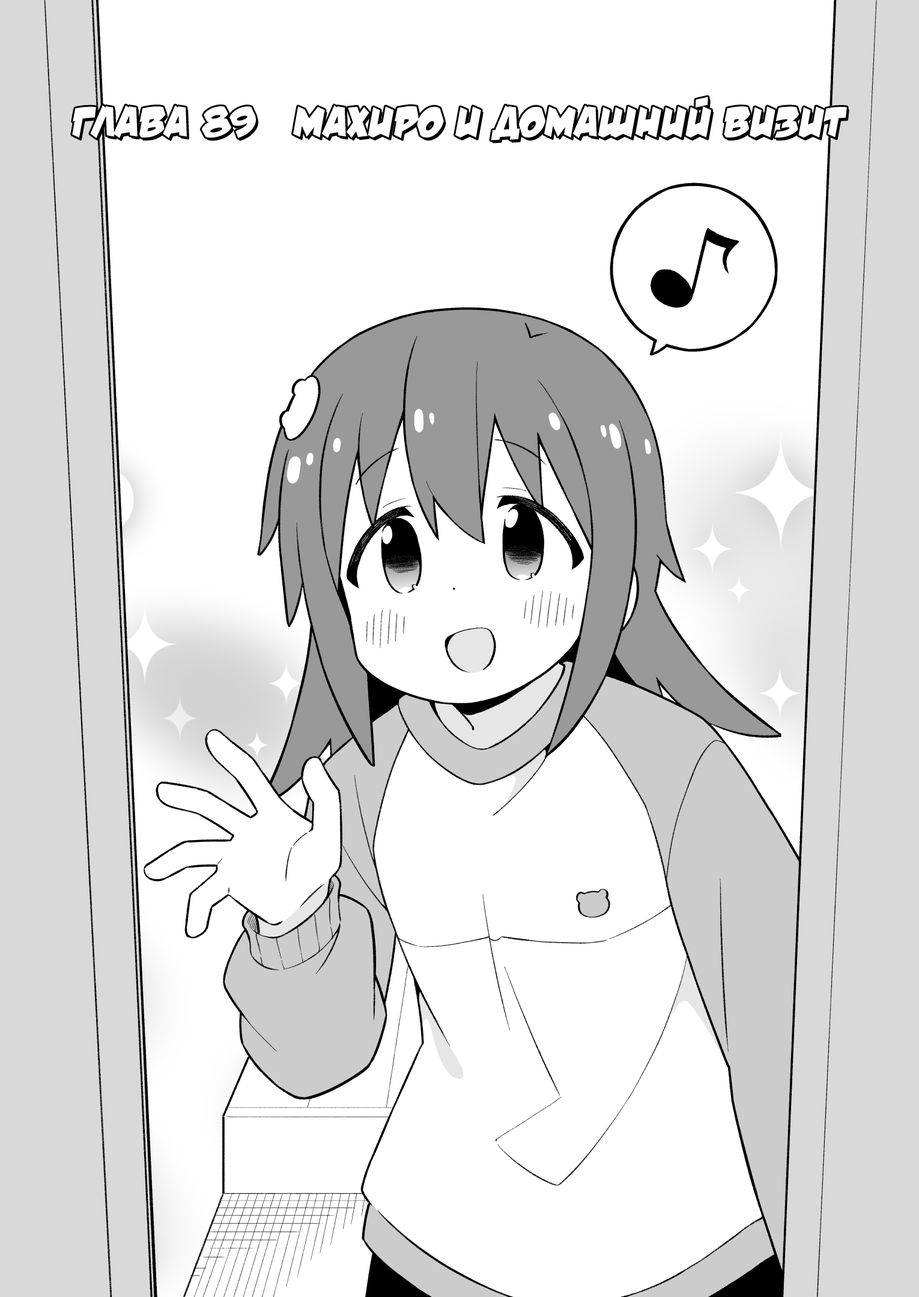
<style>
.page{position:relative;width:919px;height:1297px;background:#ffffff}
.page>*{position:absolute;margin:0}
.t1{font:43.2px "v_DamnNoisyKids";color:#ffffff;text-transform:uppercase}
</style>
<div class="page">
<p class="t1" style="left:72px;top:97px;width:775px;height:44px">Глава 89   Махиро и домашний визит</p>
</div>
